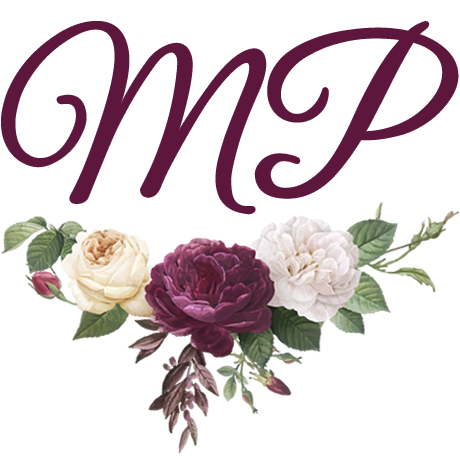
<style>
.page{position:relative;width:460px;height:460px;background:#ffffff}
.page>*{position:absolute;margin:0}
.t1{font:203.4px "GreatVibes-Regular";letter-spacing:-0.1em;color:#5e173c;font-weight:bold;scale:0.89 1}
</style>
<div class="page">
<p class="t1" style="left:3px;top:23px;width:454px;height:190px">M P</p>
</div>
